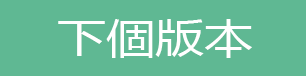
<style>
.page{position:relative;width:306px;height:76px;background:#5fb893}
.page>*{position:absolute;margin:0}
.t1{font:40.4px "MicrosoftYaHei";color:#ffffff;scale:1.21 1}
</style>
<div class="page">
<p class="t1" style="left:58px;top:19px;width:194px;height:39px">下個版本</p>
</div>
